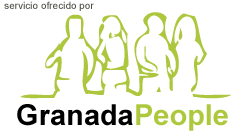
<style>
.page{position:relative;width:245px;height:136px;background:#ffffff}
.page>*{position:absolute;margin:0}
.t1{font:10px "ArialMT";color:#4f4f47}
.t2{font:29px "Arial-BoldMT";color:#000000}
.t3{font:29px "Arial-BoldMT";color:#acc83d}
</style>
<div class="page">
<p class="t1" style="left:4px;top:1px;width:90px;height:10px">servicio ofrecido por</p>
<p class="t2" style="left:17px;top:104px;width:211px;height:27px">Granada<span class="t3">People</span></p>
</div>
